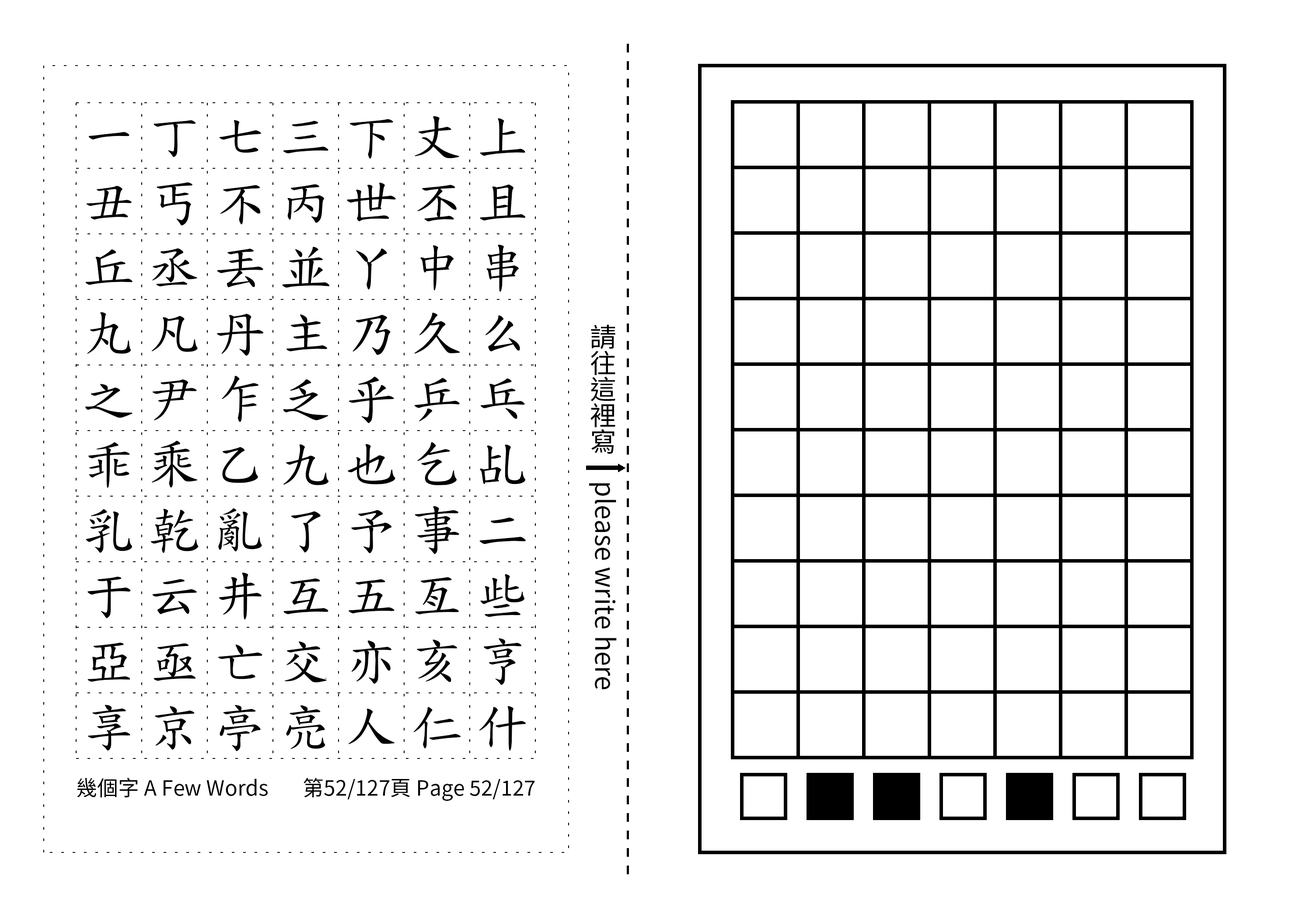
<style>
.page{position:relative;width:1299px;height:918px;background:#ffffff}
.page>*{position:absolute;margin:0}
.t1{font:52.5px/65.6px "TW-Kai-98_1";letter-spacing:0.25em;color:#000000}
.t2{font:26.2px "SourceHanSansTC-Regular";color:#000000}
.t3{font:21px "SourceHanSansTC-Regular";color:#000000}
</style>
<div class="page">
<p class="t1" style="left:85px;top:116px;width:441px;height:636px;text-align:center">一丁七三下丈上丑丐不丙世丕且丘丞丟並丫中串丸凡丹主乃久么之尹乍乏乎乒乓乖乘乙九也乞乩乳乾亂了予事二于云井互五亙些亞亟亡交亦亥亨享京亭亮人仁什</p>
<p class="t2" style="left:589px;top:324px;width:28px;height:366px;text-align:center">請往這裡寫　please write here</p>
<p class="t3" style="left:77px;top:778px;width:191px;height:20px">幾個字 A Few Words</p>
<p class="t3" style="left:303px;top:778px;width:232px;height:23px">第52/127頁 Page 52/127</p>
</div>
